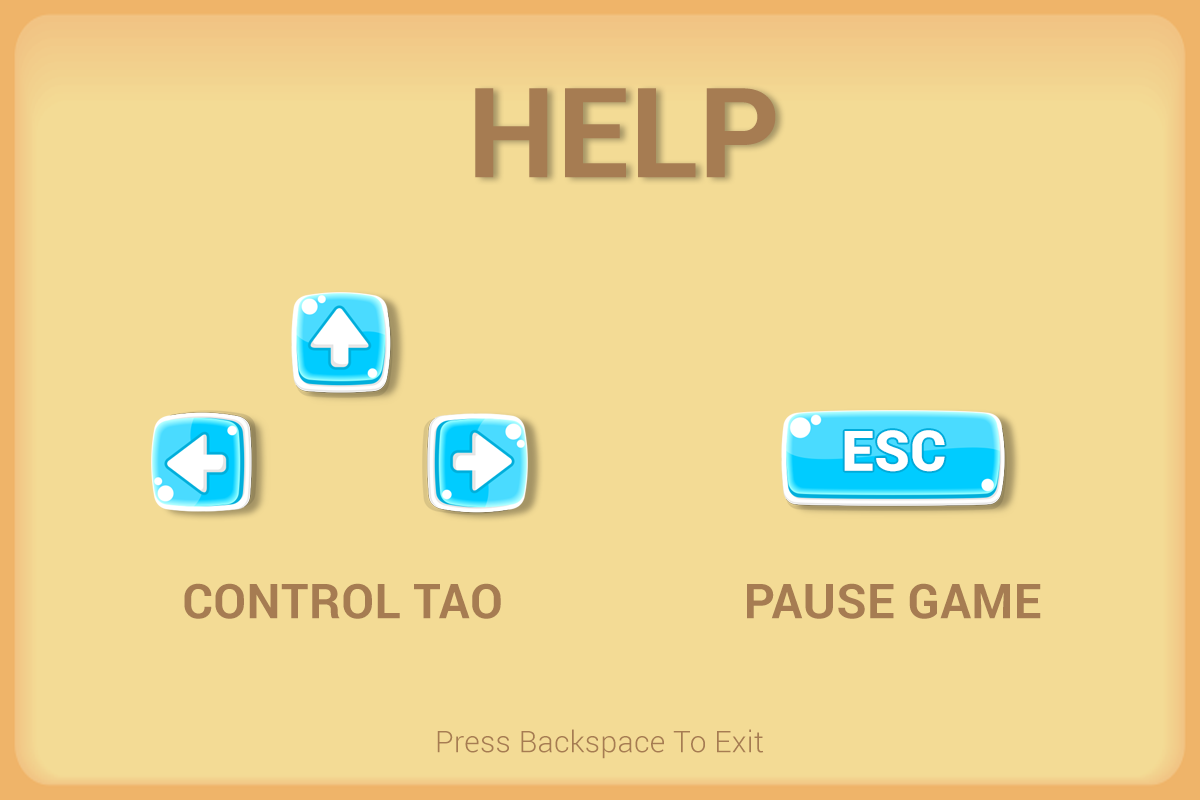
<style>
.page{position:relative;width:1200px;height:800px;background:#f3db95}
.page>*{position:absolute;margin:0}
.t1{font:125px "Roboto-Bold";letter-spacing:0.01em;color:#a67c52}
.t2{font:56px "Roboto-Black";letter-spacing:0.01em;color:#ffffff}
.t3{font:48px "Roboto-Bold";letter-spacing:0.01em;color:#a67c52}
.t4{font:30px "Roboto-Light";letter-spacing:0.01em;color:#a67c52}
</style>
<div class="page">
<p class="t1" style="left:475px;top:88px;width:301px;height:90px">HELP</p>
<p class="t2" style="left:844px;top:430px;width:101px;height:42px">ESC</p>
<p class="t3" style="left:184px;top:583px;width:317px;height:36px">CONTROL TAO</p>
<p class="t3" style="left:747px;top:583px;width:294px;height:36px">PAUSE GAME</p>
<p class="t4" style="left:437px;top:729px;width:327px;height:30px">Press Backspace To Exit</p>
</div>
